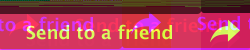
<style>
.page{position:relative;width:250px;height:50px}
.page>*{position:absolute;margin:0}
.t1{font:18px "LucidaGrande-Bold"}
</style>
<div class="page">
<p class="t1" style="left:75px;top:17px;width:146px;height:16px">Send to a friend</p>
</div>
